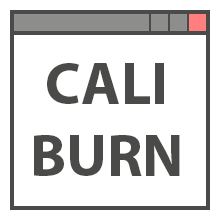
<style>
.page{position:relative;width:220px;height:220px;background:#ffffff}
.page>*{position:absolute;margin:0}
.t1{font:60px "MyriadPro-Bold";color:#4a4b48}
</style>
<div class="page">
<p class="t1" style="left:34px;top:63px;width:146px;height:113px;text-align:center">CALI<br>BURN</p>
</div>
